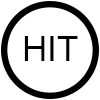
<style>
.page{position:relative;width:100px;height:100px;background:#ffffff}
.page>*{position:absolute;margin:0}
.t1{font:35px "ArialMT";color:#010101}
</style>
<div class="page">
<p class="t1" style="left:24px;top:36px;width:54px;height:25px">HIT</p>
</div>
